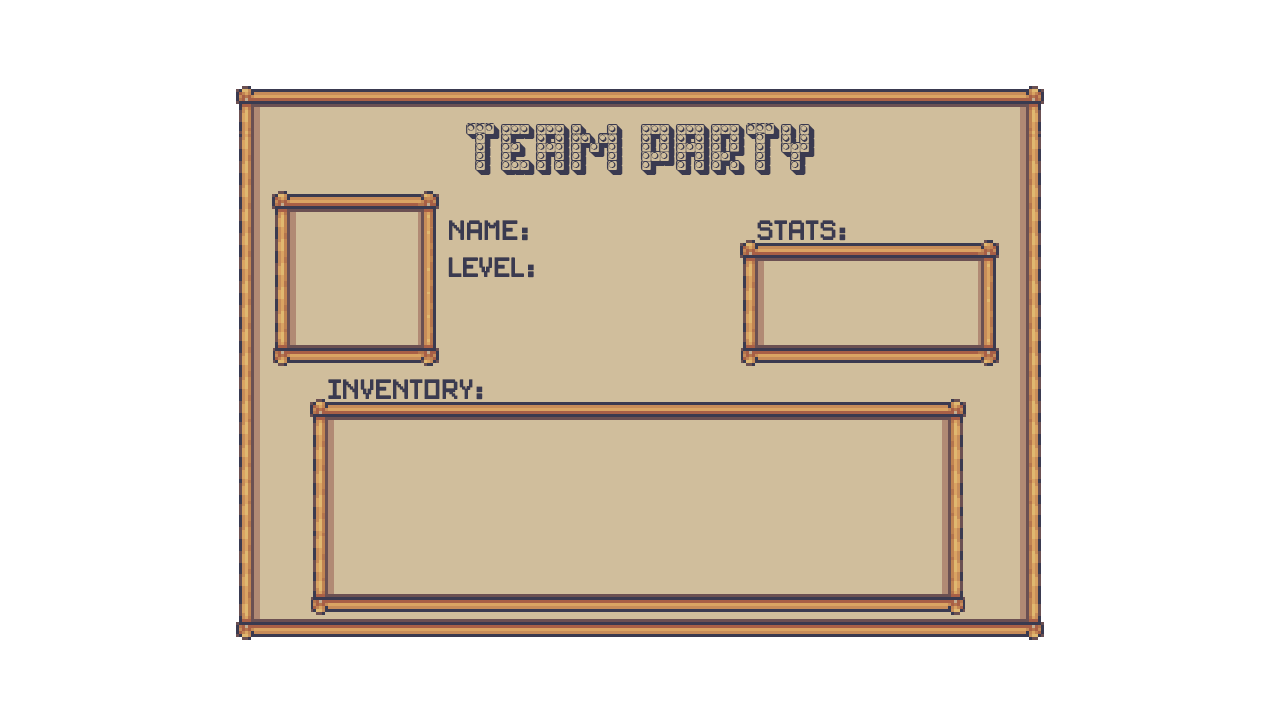
<style>
.page{position:relative;width:1280px;height:720px;background:#ffffff}
.page>*{position:absolute;margin:0}
.t1{font:66.7px "Toys-Regular";color:#3a3a50}
.t2{font:25px "PixelSplitter-Bold";color:#3a3a50}
</style>
<div class="page">
<p class="t1" style="left:466px;top:123px;width:349px;height:52px">team party</p>
<p class="t2" style="left:449px;top:220px;width:79px;height:21px">Name:</p>
<p class="t2" style="left:757px;top:220px;width:89px;height:21px">stats:</p>
<p class="t2" style="left:448px;top:257px;width:86px;height:21px">level:</p>
<p class="t2" style="left:328px;top:379px;width:155px;height:21px">inventory:</p>
</div>
